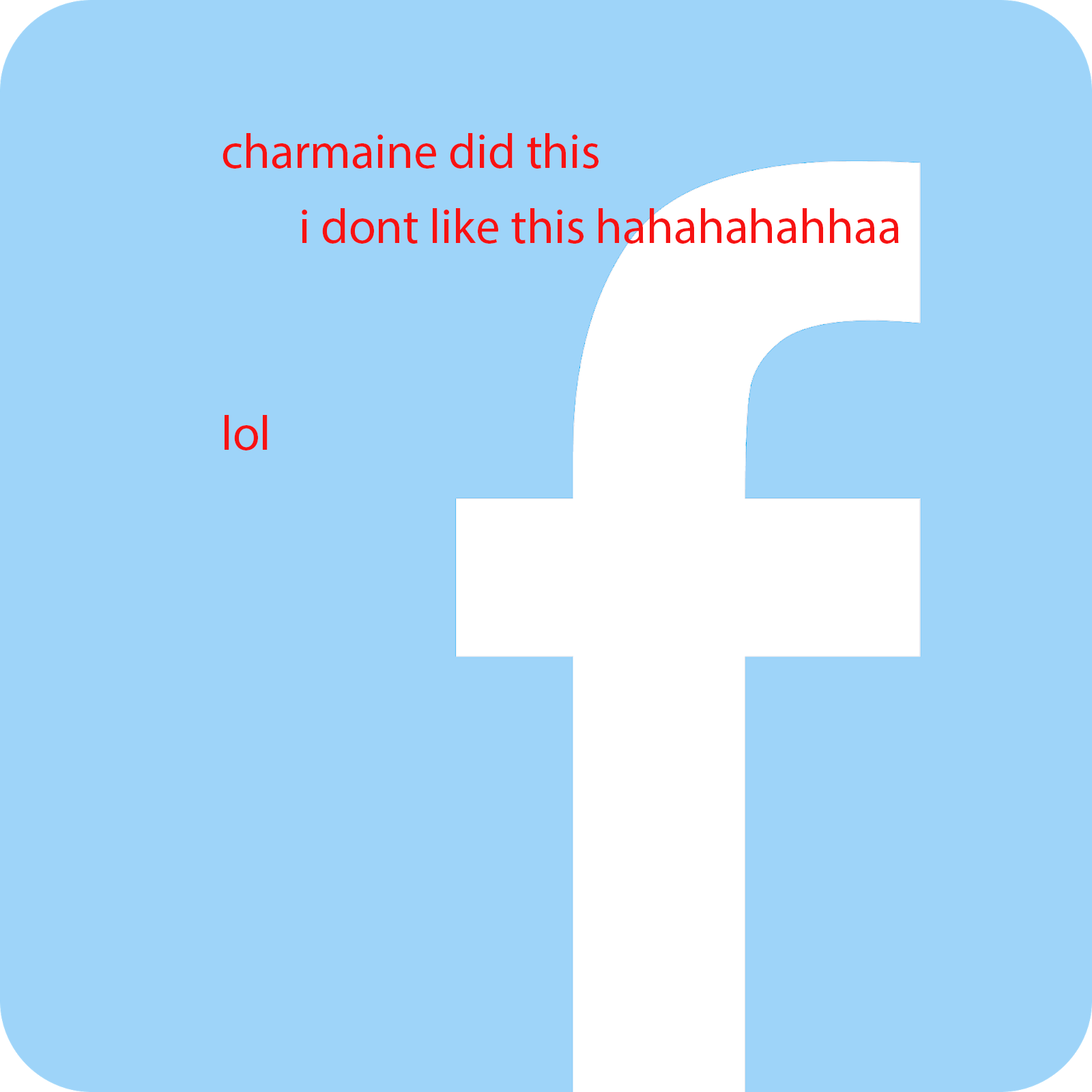
<style>
.page{position:relative;width:1092px;height:1092px;background:#9ed4f9}
.page>*{position:absolute;margin:0}
.t1{font:49.1px "MyriadPro-Regular";color:#f71212}
</style>
<div class="page">
<p class="t1" style="left:222px;top:133px;width:377px;height:36px">charmaine did this</p>
<p class="t1" style="left:302px;top:208px;width:597px;height:36px">i dont like this hahahahahhaa</p>
<p class="t1" style="left:225px;top:415px;width:43px;height:35px">lol</p>
</div>
